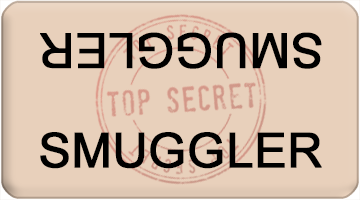
<style>
.page{position:relative;width:360px;height:200px;background:#e8d0bb}
.page>*{position:absolute;margin:0}
.t1{font:48px "ArialMT";color:#000000;font-weight:bold}
</style>
<div class="page">
<p class="t1" style="left:40px;top:32px;width:282px;height:37px;rotate:180deg">SMUGGLER</p>
<p class="t1" style="left:40px;top:132px;width:282px;height:37px">SMUGGLER</p>
</div>
